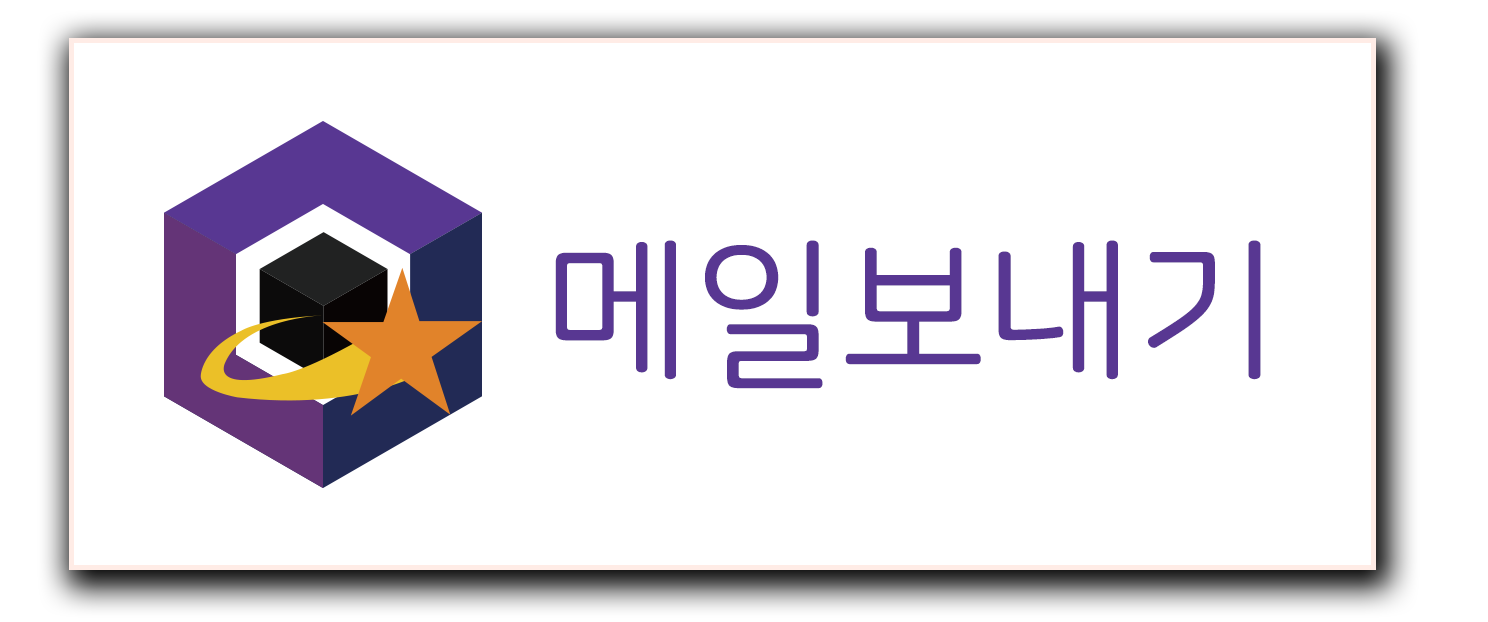
<style>
.page{position:relative;width:1488px;height:622px;background:#ffffff}
.page>*{position:absolute;margin:0}
.t1{font:161.8px "NanumSquareRoundR";color:#583792}
</style>
<div class="page">
<p class="t1" style="left:555px;top:240px;width:706px;height:149px">메일보내기</p>
</div>
